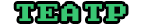
<style>
.page{position:relative;width:144px;height:24px;background:#ffffff}
.page>*{position:absolute;margin:0}
.t1{font:19.6px "PxPlus_IBM_BIOS";letter-spacing:0.075em;color:#39c773;scale:1.13 1}
</style>
<div class="page">
<p class="t1" style="left:16px;top:4px;width:110px;height:17px">ТЕАТР</p>
</div>
